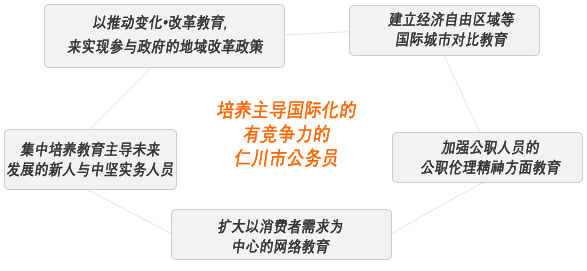
<style>
.page{position:relative;width:587px;height:271px;background:#ffffff}
.page>*{position:absolute;margin:0}
.t1{font:16px/24px "New-Gulim";color:#333333;font-weight:bold;font-style:italic;scale:0.85 1}
.t2{font:16px/20px "New-Gulim";color:#333333;font-weight:bold;font-style:italic;scale:0.85 1}
.t3{font:20px/24px "New-Gulim";color:#ff6600;font-weight:bold;font-style:italic;scale:0.85 1}
</style>
<div class="page">
<p class="t1" style="left:67px;top:14px;width:197px;height:40px;text-align:center">以推动变化•改革教育，<br>来实现参与政府的地域改革政策</p>
<p class="t2" style="left:388px;top:11px;width:127px;height:36px;text-align:center">建立经济自由区域等<br>国际城市对比教育</p>
<p class="t3" style="left:217px;top:100px;width:140px;height:67px;text-align:center">培养主导国际化的<br>有竞争力的<br>仁川市公务员</p>
<p class="t2" style="left:7px;top:141px;width:166px;height:36px;text-align:center">集中培养教育主导未来<br>发展的新人与中坚实务人员</p>
<p class="t2" style="left:421px;top:140px;width:140px;height:35px;text-align:center">加强公职人员的<br>公职伦理精神方面教育</p>
<p class="t2" style="left:218px;top:218px;width:125px;height:36px;text-align:center">扩大以消费者需求为<br>中心的网络教育</p>
</div>
